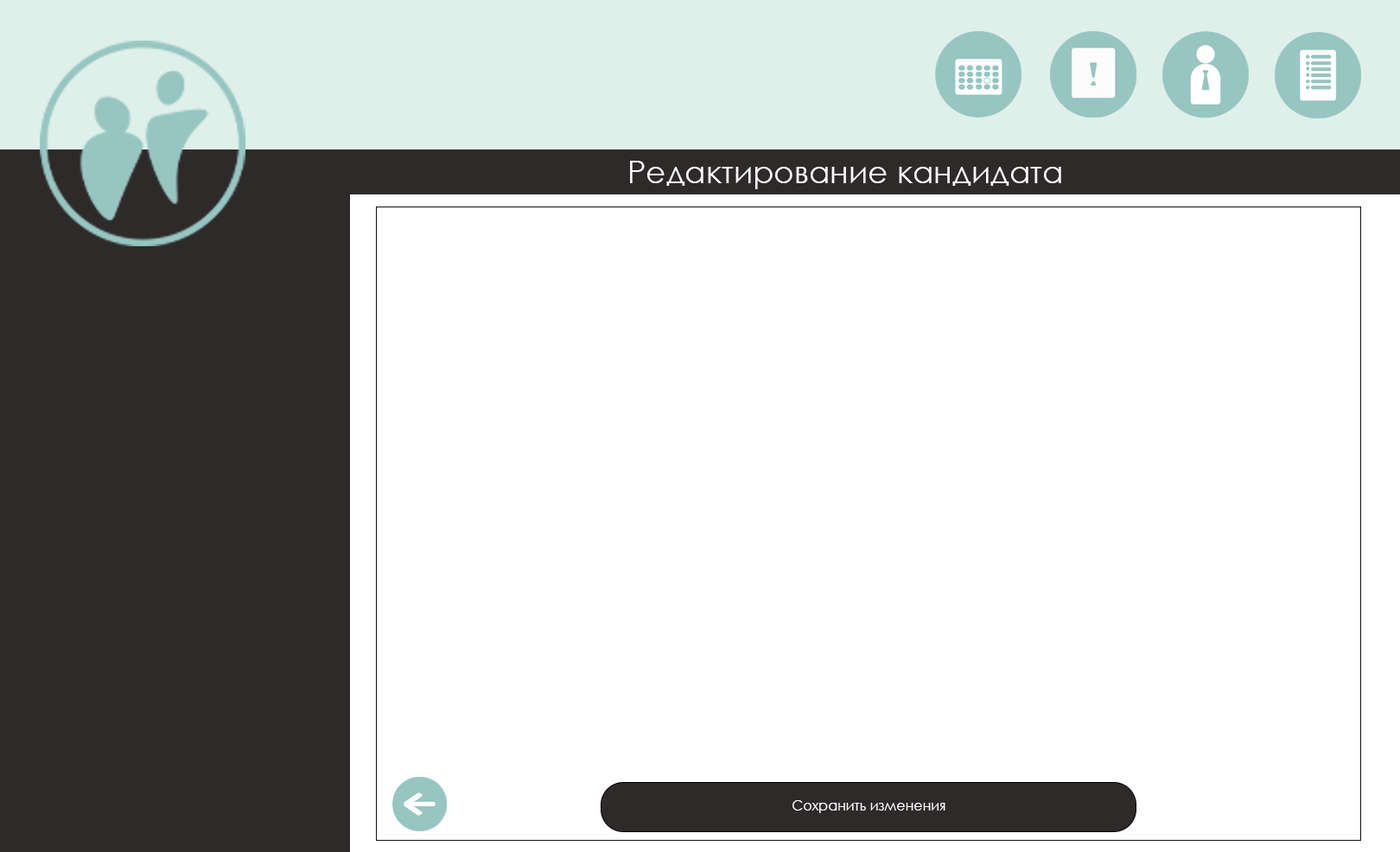
<style>
.page{position:relative;width:1400px;height:852px;background:#ffffff}
.page>*{position:absolute;margin:0}
.t1{font:31.1px "CenturyGothic";color:#ffffff}
.t2{font:13.8px "CenturyGothic";color:#ffffff}
</style>
<div class="page">
<p class="t1" style="left:630px;top:161px;width:431px;height:28px">Редактирование кандидата</p>
<p class="t2" style="left:792px;top:800px;width:153px;height:13px">Сохранить изменения</p>
</div>
